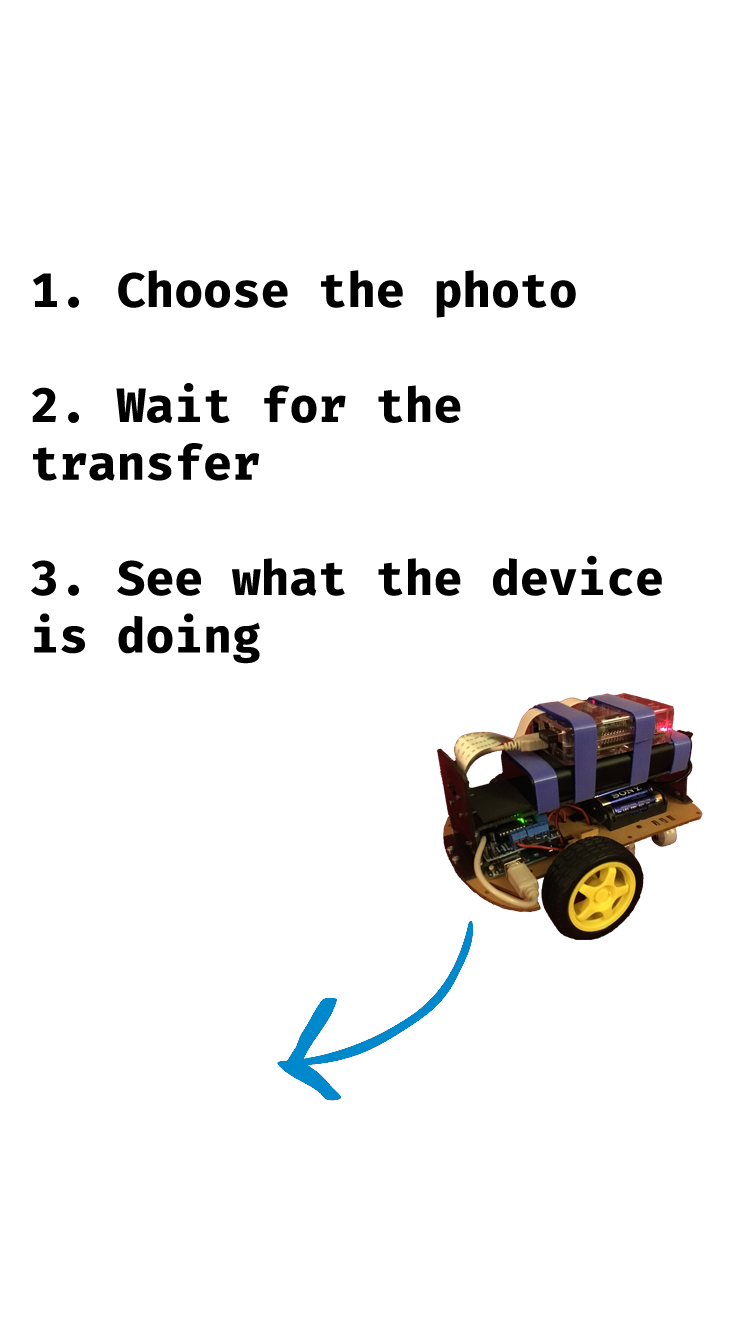
<style>
.page{position:relative;width:750px;height:1334px;background:#ffffff}
.page>*{position:absolute;margin:0}
.t1{font:48px "FiraMono-Bold";color:#000000}
</style>
<div class="page">
<p class="t1" style="left:31px;top:270px;width:631px;height:394px">1. Choose the photo<br><br>2. Wait for the transfer<br><br>3. See what the device is doing</p>
</div>
